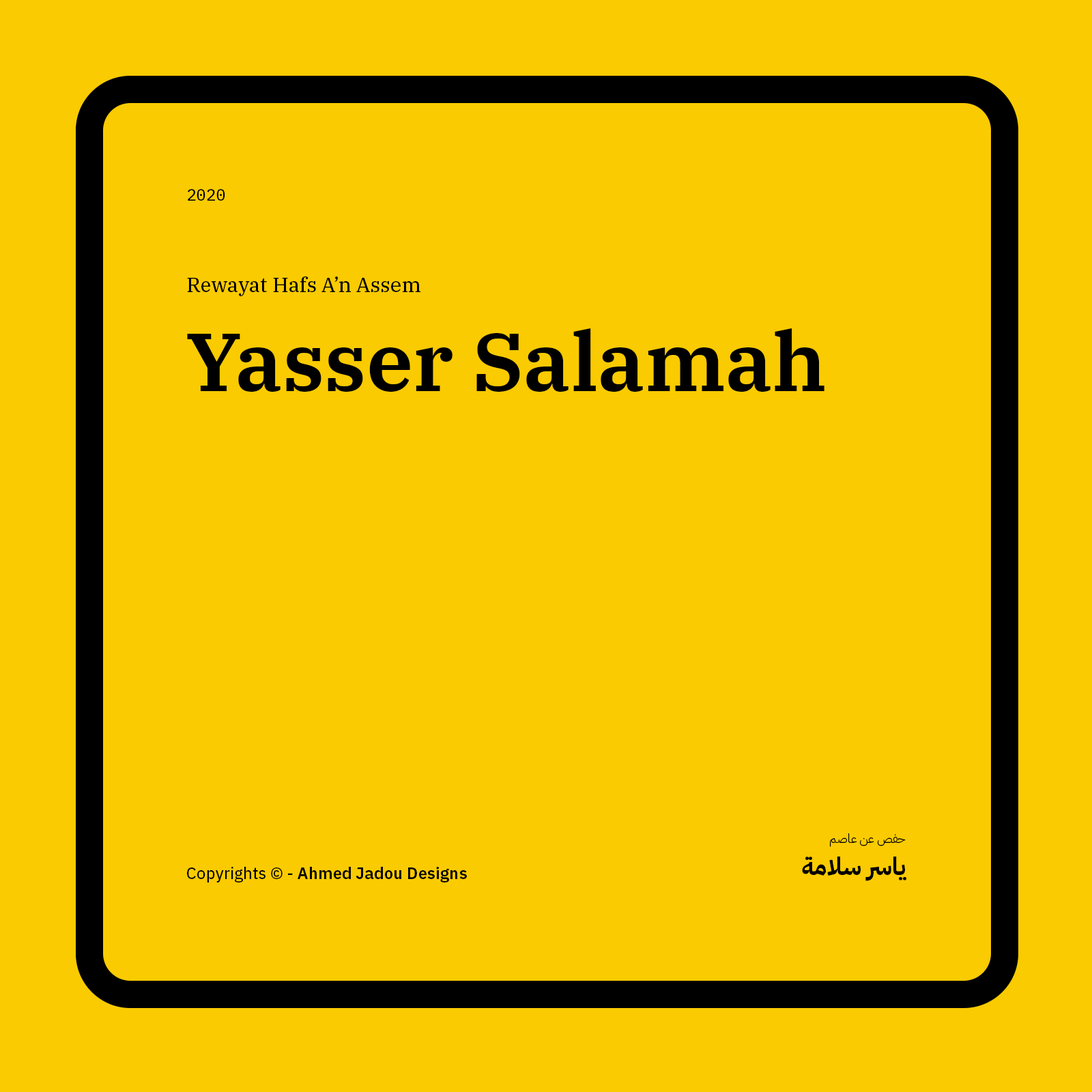
<style>
.page{position:relative;width:1092px;height:1092px;background:#facb00}
.page>*{position:absolute;margin:0}
.t1{font:16.4px "IBMPlexMono-Text";color:#000000}
.t2{font:20.5px "IBMPlexSerif-Text";color:#000000}
.t3{font:81.9px "IBMPlexSerif-SemiBold";color:#000000}
.t4{font:12.3px "IBMPlexArabic-Light";color:#000000}
.t5{font:24.6px "IBMPlexArabic-Bold";color:#000000}
.t6{font:16.4px "IBMPlexSans-SemiBold";color:#000000}
.t7{font:16.4px "IBMPlexSans-Text";color:#000000}
</style>
<div class="page">
<p class="t1" style="left:188px;top:189px;width:37px;height:12px">2020</p>
<p class="t2" style="left:187px;top:276px;width:233px;height:20px">Rewayat Hafs A’n Assem</p>
<p class="t3" style="left:187px;top:328px;width:637px;height:64px">Yasser Salamah</p>
<p class="t4" style="left:830px;top:833px;width:76px;height:14px">حفص عن عاصم</p>
<p class="t5" style="left:802px;top:857px;width:104px;height:24px">ياسر سلامة</p>
<p class="t6" style="left:187px;top:867px;width:280px;height:15px"><span class="t7">Copyrights © - </span>Ahmed Jadou Designs</p>
</div>
